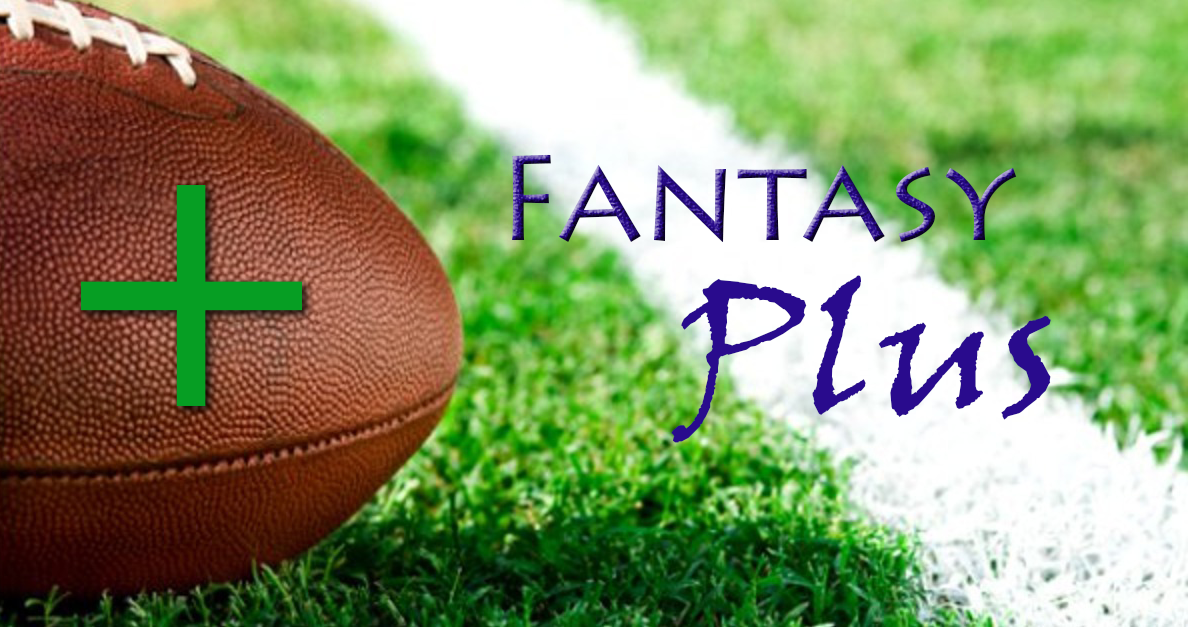
<style>
.page{position:relative;width:1188px;height:627px}
.page>*{position:absolute;margin:0}
.t1{font:120px "LithosPro-Regular"}
.t2{font:180px "VinerHandITC";color:#290b8d}
</style>
<div class="page">
<p class="t1" style="left:512px;top:154px;width:505px;height:88px">Fantasy</p>
<p class="t2" style="left:671px;top:275px;width:380px;height:168px">Plus</p>
</div>
